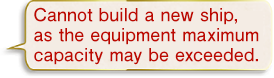
<style>
.page{position:relative;width:274px;height:78px;background:#f4ece4}
.page>*{position:absolute;margin:0}
.t1{font:18px/20px "FutoGoB101Pr5-Bold";color:#bd0800}
</style>
<div class="page">
<p class="t1" style="left:34px;top:7px;width:225px;height:58px">Cannot build a new ship,<br>as the equipment maximum<br>capacity may be exceeded.</p>
</div>
